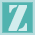
<style>
.page{position:relative;width:35px;height:35px;background:#50b3af}
.page>*{position:absolute;margin:0}
.t1{font:34px "StencilStd";color:#d2eded}
</style>
<div class="page">
<p class="t1" style="left:8px;top:5px;width:19px;height:26px">Z</p>
</div>
